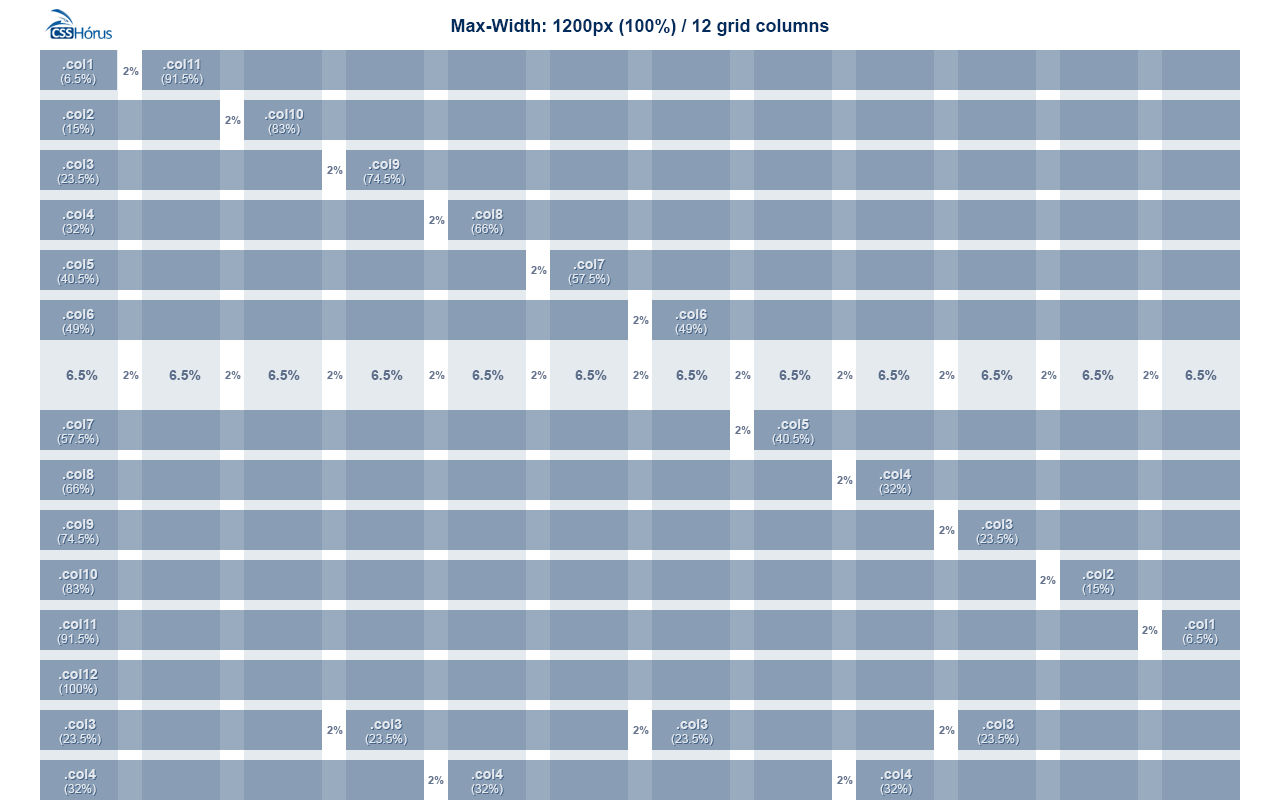
<style>
.page{position:relative;width:1280px;height:800px;background:#899eb5}
.page>*{position:absolute;margin:0}
.t1{font:18px "Arial-BoldMT";color:#002d5e}
.t2{font:12px "ArialMT";color:#e5e9ee}
.t3{font:14px "Arial-BoldMT";color:#e5e9ee}
.t4{font:11px "Arial-BoldMT";color:#66758f}
.t5{font:14px "Arial-BoldMT";color:#5c6d8a}
</style>
<div class="page">
<p class="t1" style="left:451px;top:19px;width:378px;height:17px">Max-Width: 1200px (100%) / 12 grid columns</p>
<p class="t2" style="left:60px;top:59px;width:36px;height:26px;text-align:center"><span class="t3">.col1<br></span>(6.5%)</p>
<p class="t2" style="left:161px;top:59px;width:42px;height:26px;text-align:center"><span class="t3">.col11<br></span>(91.5%)</p>
<p class="t4" style="left:123px;top:67px;width:16px;height:8px">2%</p>
<p class="t3" style="left:62px;top:109px;width:32px;height:26px;text-align:center">.col2<br><span class="t2">(15%)</span></p>
<p class="t3" style="left:265px;top:109px;width:39px;height:26px;text-align:center">.col10<br><span class="t2">(83%)</span></p>
<p class="t4" style="left:225px;top:116px;width:16px;height:8px">2%</p>
<p class="t2" style="left:57px;top:159px;width:42px;height:26px;text-align:center"><span class="t3">.col3<br></span>(23.5%)</p>
<p class="t2" style="left:363px;top:159px;width:42px;height:26px;text-align:center"><span class="t3">.col9<br></span>(74.5%)</p>
<p class="t4" style="left:327px;top:166px;width:16px;height:8px">2%</p>
<p class="t3" style="left:62px;top:209px;width:32px;height:26px;text-align:center">.col4<br><span class="t2">(32%)</span></p>
<p class="t3" style="left:471px;top:209px;width:32px;height:26px;text-align:center">.col8<br><span class="t2">(66%)</span></p>
<p class="t4" style="left:429px;top:216px;width:16px;height:8px">2%</p>
<p class="t2" style="left:57px;top:259px;width:42px;height:26px;text-align:center"><span class="t3">.col5<br></span>(40.5%)</p>
<p class="t4" style="left:531px;top:266px;width:16px;height:8px">2%</p>
<p class="t2" style="left:568px;top:259px;width:42px;height:26px;text-align:center"><span class="t3">.col7<br></span>(57.5%)</p>
<p class="t3" style="left:62px;top:309px;width:32px;height:26px;text-align:center">.col6<br><span class="t2">(49%)</span></p>
<p class="t4" style="left:633px;top:316px;width:16px;height:8px">2%</p>
<p class="t3" style="left:675px;top:309px;width:32px;height:26px;text-align:center">.col6<br><span class="t2">(49%)</span></p>
<p class="t5" style="left:66px;top:370px;width:32px;height:10px">6.5%</p>
<p class="t4" style="left:123px;top:371px;width:16px;height:8px">2%</p>
<p class="t5" style="left:169px;top:370px;width:32px;height:10px">6.5%</p>
<p class="t4" style="left:225px;top:371px;width:16px;height:8px">2%</p>
<p class="t5" style="left:268px;top:370px;width:32px;height:10px">6.5%</p>
<p class="t4" style="left:327px;top:371px;width:16px;height:8px">2%</p>
<p class="t5" style="left:371px;top:370px;width:32px;height:10px">6.5%</p>
<p class="t4" style="left:429px;top:371px;width:16px;height:8px">2%</p>
<p class="t5" style="left:472px;top:370px;width:32px;height:10px">6.5%</p>
<p class="t4" style="left:531px;top:371px;width:16px;height:8px">2%</p>
<p class="t5" style="left:575px;top:370px;width:32px;height:10px">6.5%</p>
<p class="t4" style="left:633px;top:371px;width:16px;height:8px">2%</p>
<p class="t5" style="left:676px;top:370px;width:32px;height:10px">6.5%</p>
<p class="t4" style="left:735px;top:371px;width:16px;height:8px">2%</p>
<p class="t5" style="left:779px;top:370px;width:32px;height:10px">6.5%</p>
<p class="t4" style="left:837px;top:371px;width:16px;height:8px">2%</p>
<p class="t5" style="left:878px;top:370px;width:32px;height:10px">6.5%</p>
<p class="t4" style="left:939px;top:371px;width:16px;height:8px">2%</p>
<p class="t5" style="left:981px;top:370px;width:32px;height:10px">6.5%</p>
<p class="t4" style="left:1041px;top:371px;width:16px;height:8px">2%</p>
<p class="t5" style="left:1082px;top:370px;width:32px;height:10px">6.5%</p>
<p class="t4" style="left:1143px;top:371px;width:16px;height:8px">2%</p>
<p class="t5" style="left:1185px;top:370px;width:32px;height:10px">6.5%</p>
<p class="t2" style="left:57px;top:419px;width:42px;height:26px;text-align:center"><span class="t3">.col7<br></span>(57.5%)</p>
<p class="t2" style="left:772px;top:419px;width:42px;height:26px;text-align:center"><span class="t3">.col5<br></span>(40.5%)</p>
<p class="t4" style="left:735px;top:426px;width:16px;height:8px">2%</p>
<p class="t3" style="left:62px;top:469px;width:32px;height:26px;text-align:center">.col8<br><span class="t2">(66%)</span></p>
<p class="t3" style="left:879px;top:469px;width:32px;height:26px;text-align:center">.col4<br><span class="t2">(32%)</span></p>
<p class="t4" style="left:837px;top:476px;width:16px;height:8px">2%</p>
<p class="t2" style="left:57px;top:519px;width:42px;height:26px;text-align:center"><span class="t3">.col9<br></span>(74.5%)</p>
<p class="t2" style="left:976px;top:519px;width:42px;height:26px;text-align:center"><span class="t3">.col3<br></span>(23.5%)</p>
<p class="t4" style="left:939px;top:526px;width:16px;height:8px">2%</p>
<p class="t3" style="left:59px;top:569px;width:39px;height:26px;text-align:center">.col10<br><span class="t2">(83%)</span></p>
<p class="t3" style="left:1082px;top:569px;width:32px;height:26px;text-align:center">.col2<br><span class="t2">(15%)</span></p>
<p class="t4" style="left:1040px;top:576px;width:16px;height:8px">2%</p>
<p class="t2" style="left:57px;top:619px;width:42px;height:26px;text-align:center"><span class="t3">.col11<br></span>(91.5%)</p>
<p class="t4" style="left:1142px;top:626px;width:16px;height:8px">2%</p>
<p class="t2" style="left:1182px;top:619px;width:36px;height:26px;text-align:center"><span class="t3">.col1<br></span>(6.5%)</p>
<p class="t3" style="left:59px;top:669px;width:39px;height:26px;text-align:center">.col12<br><span class="t2">(100%)</span></p>
<p class="t2" style="left:59px;top:719px;width:42px;height:26px;text-align:center"><span class="t3">.col3<br></span>(23.5%)</p>
<p class="t4" style="left:327px;top:726px;width:16px;height:8px">2%</p>
<p class="t2" style="left:365px;top:719px;width:42px;height:26px;text-align:center"><span class="t3">.col3<br></span>(23.5%)</p>
<p class="t4" style="left:633px;top:726px;width:16px;height:8px">2%</p>
<p class="t2" style="left:671px;top:719px;width:42px;height:26px;text-align:center"><span class="t3">.col3<br></span>(23.5%)</p>
<p class="t4" style="left:939px;top:726px;width:16px;height:8px">2%</p>
<p class="t2" style="left:977px;top:719px;width:42px;height:26px;text-align:center"><span class="t3">.col3<br></span>(23.5%)</p>
<p class="t3" style="left:64px;top:769px;width:32px;height:26px;text-align:center">.col4<br><span class="t2">(32%)</span></p>
<p class="t3" style="left:471px;top:769px;width:32px;height:26px;text-align:center">.col4<br><span class="t2">(32%)</span></p>
<p class="t3" style="left:880px;top:769px;width:32px;height:26px;text-align:center">.col4<br><span class="t2">(32%)</span></p>
<p class="t4" style="left:428px;top:776px;width:16px;height:8px">2%</p>
<p class="t4" style="left:837px;top:776px;width:16px;height:8px">2%</p>
</div>
